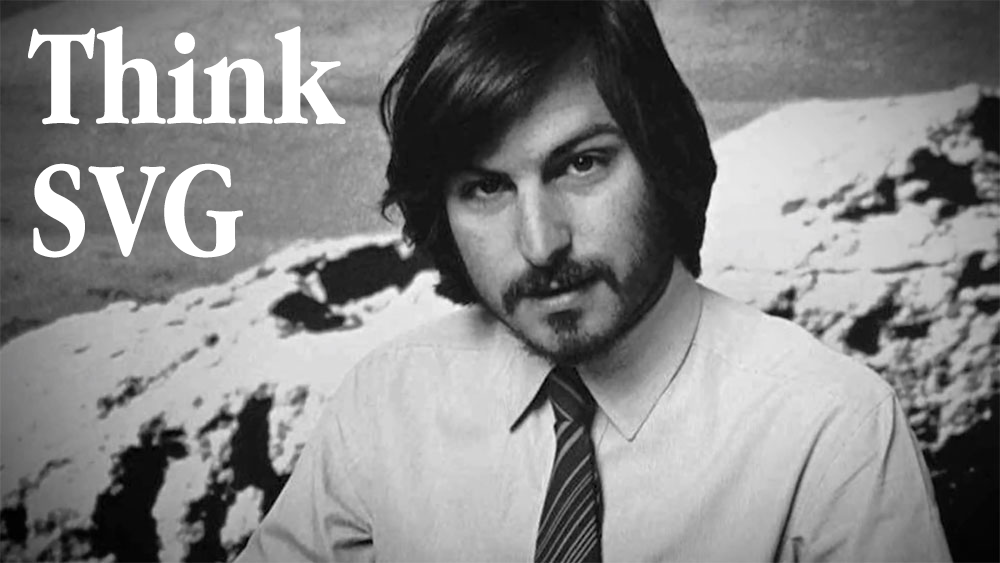
<style>
.page{position:relative;width:1000px;height:563px}
.page>*{position:absolute;margin:0}
.t1{font:140px/131px "AppleGaramond-Bold";color:#ffffff}
</style>
<div class="page">
<p class="t1" style="left:28px;top:26px;width:318px;height:232px">Think<br>SVG</p>
</div>
